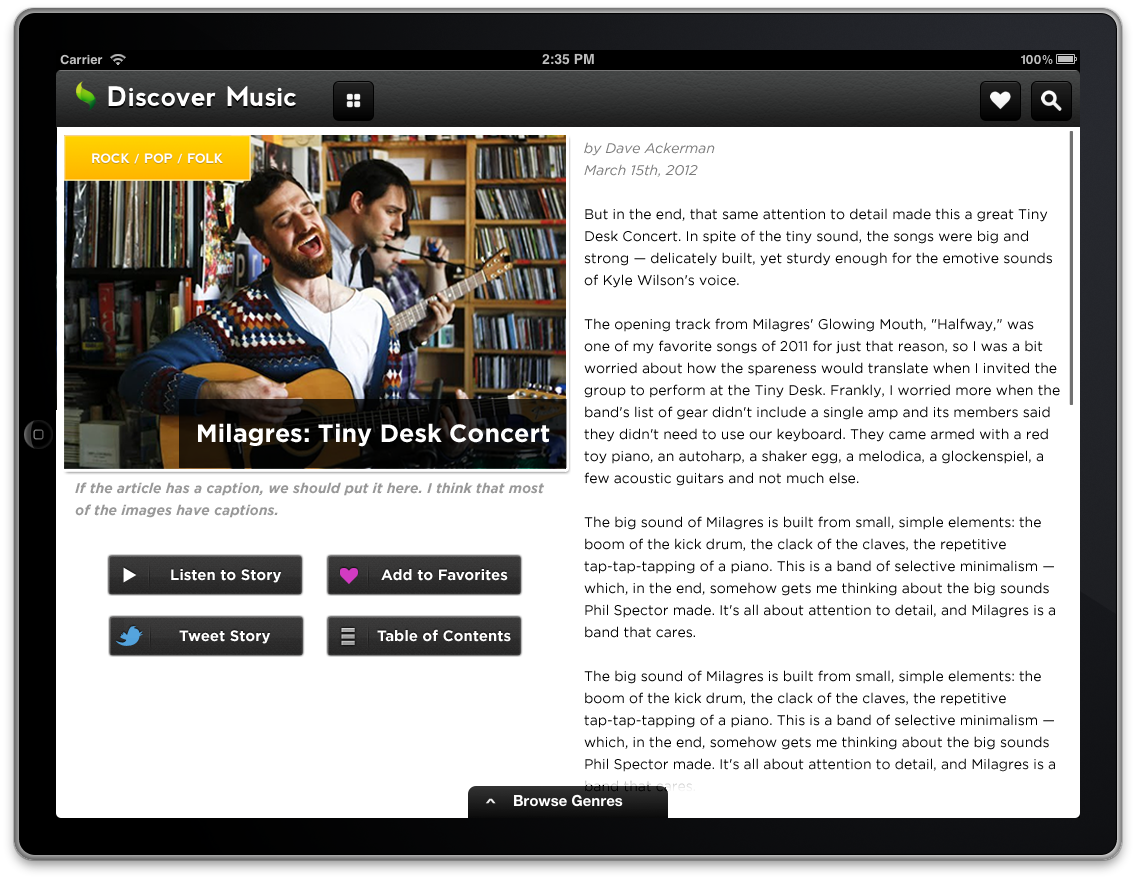
<style>
.page{position:relative;width:1136px;height:880px;background:#ffffff}
.page>*{position:absolute;margin:0}
.t1{font:14px/22px "GothamHTF-Book";color:#000000}
.t2{font:14px/22px "GothamHTF-BookItalic";color:#7a7a7a}
.t3{font:25px "GothamHTF-Bold";color:#ffffff}
.t4{font:14px/22px "GothamHTF-BoldItalic";color:#989898}
.t5{font:15px "GothamHTF-Bold";color:#ffffff}
</style>
<div class="page">
<p class="t1" style="left:584px;top:142px;width:476px;height:650px"><span class="t2">by Dave Ackerman<br>March 15th, 2012<br></span><br>But in the end, that same attention to detail made this a great Tiny Desk Concert. In spite of the tiny sound, the songs were big and strong — delicately built, yet sturdy enough for the emotive sounds of Kyle Wilson's voice.<br><br>The opening track from Milagres' Glowing Mouth, "Halfway," was one of my favorite songs of 2011 for just that reason, so I was a bit worried about how the spareness would translate when I invited the group to perform at the Tiny Desk. Frankly, I worried more when the band's list of gear didn't include a single amp and its members said they didn't need to use our keyboard. They came armed with a red toy piano, an autoharp, a shaker egg, a melodica, a glockenspiel, a few acoustic guitars and not much else.<br><br>The big sound of Milagres is built from small, simple elements: the boom of the kick drum, the clack of the claves, the repetitive tap-tap-tapping of a piano. This is a band of selective minimalism — which, in the end, somehow gets me thinking about the big sounds Phil Spector made. It's all about attention to detail, and Milagres is a band that cares.<br><br>The big sound of Milagres is built from small, simple elements: the boom of the kick drum, the clack of the claves, the repetitive tap-tap-tapping of a piano. This is a band of selective minimalism — which, in the end, somehow gets me thinking about the big sounds Phil Spector made. It's all about attention to detail, and Milagres is a band that cares.<br><br>tap-tap-tapping of a piano. This is a band of selective minimalism — which, in the end, somehow gets me thinking about the big sounds Phil Spector made. It's all about attention to detail, and Milagres is a band that cares.</p>
<p class="t3" style="left:198px;top:423px;width:352px;height:24px">Milagres: Tiny Desk Concert</p>
<p class="t4" style="left:75px;top:482px;width:470px;height:36px">If the article has a caption, we should put it here. I think that most of the images have captions.</p>
<p class="t5" style="left:171px;top:569px;width:111px;height:14px">Listen to Story</p>
<p class="t5" style="left:381px;top:569px;width:127px;height:12px">Add to Favorites</p>
<p class="t5" style="left:179px;top:630px;width:92px;height:14px">Tweet Story</p>
<p class="t5" style="left:377px;top:629px;width:134px;height:13px">Table of Contents</p>
</div>
